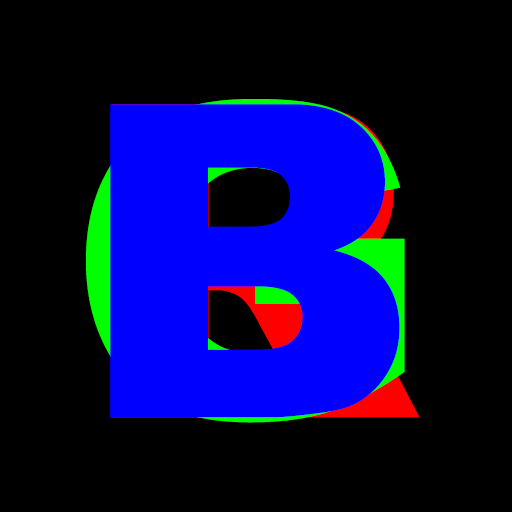
<style>
.page{position:relative;width:512px;height:512px;background:#000000}
.page>*{position:absolute;margin:0}
.t1{font:436.8px "Arial-Black";color:#0000ff}
</style>
<div class="page">
<p class="t1" style="left:86px;top:99px;width:319px;height:324px">G</p>
<p class="t1" style="left:110px;top:104px;width:290px;height:314px">B</p>
<p class="t1" style="left:111px;top:104px;width:309px;height:314px">R</p>
</div>
